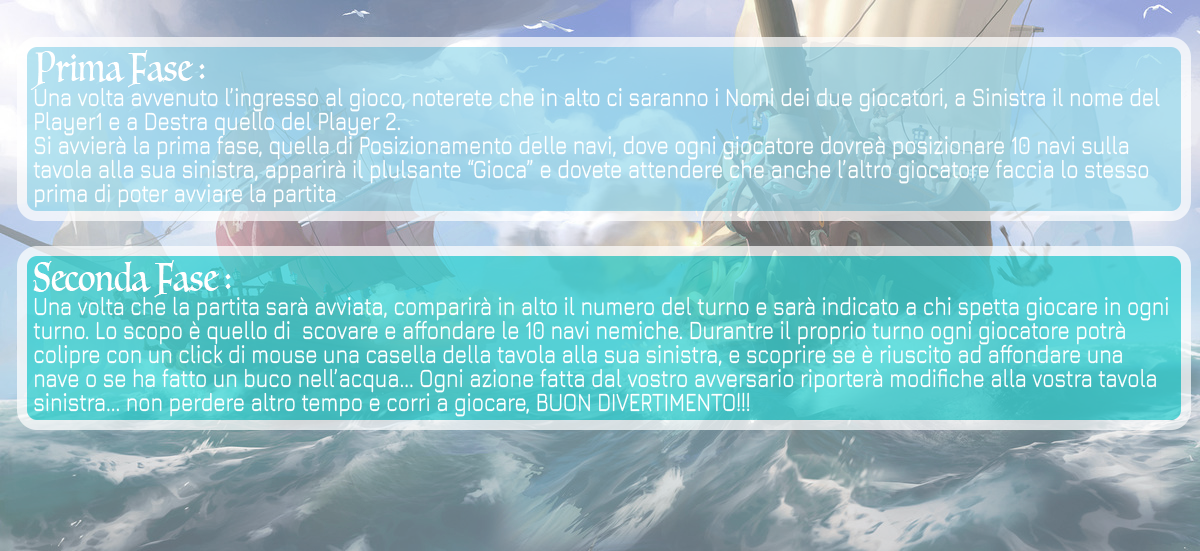
<style>
.page{position:relative;width:1200px;height:551px}
.page>*{position:absolute;margin:0}
.t1{font:39px "Luminari-Regular";color:#ffffff;scale:0.77 1}
.t2{font:26px "Jura-Medium";color:#ffffff;scale:0.77 1}
</style>
<div class="page">
<p class="t1" style="left:30px;top:50px;width:175px;height:40px">Prima Fase :</p>
<p class="t2" style="left:33px;top:87px;width:1127px;height:121px">Una volta avvenuto l’ingresso al gioco, noterete che in alto ci saranno i Nomi dei due giocatori, a Sinistra il nome del Player1 e a Destra quello del Player 2.  <br>Si avvierà la prima fase, quella di Posizionamento delle navi, dove ogni giocatore dovreà posizionare 10 navi sulla tavola alla sua sinistra, apparirà il plulsante “Gioca” e dovete attendere che anche l’altro giocatore faccia lo stesso prima di poter avviare la partita</p>
<p class="t1" style="left:33px;top:260px;width:198px;height:38px">Seconda Fase :</p>
<p class="t2" style="left:33px;top:296px;width:1135px;height:121px">Una volta che la partita sarà avviata, comparirà in alto il numero del turno e sarà indicato a chi spetta giocare in ogni turno. Lo scopo è quello di  scovare e affondare le 10 navi nemiche. Durantre il proprio turno ogni giocatore potrà colipre con un click di mouse una casella della tavola alla sua sinistra, e scoprire se è riuscito ad affondare una nave o se ha fatto un buco nell’acqua... Ogni azione fatta dal vostro avversario riporterà modifiche alla vostra tavola sinistra... non perdere altro tempo e corri a giocare, BUON DIVERTIMENTO!!!</p>
</div>
